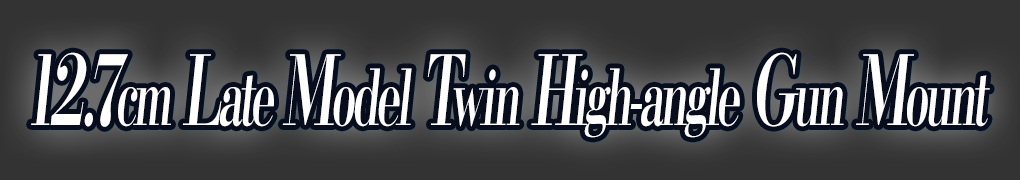
<style>
.page{position:relative;width:1020px;height:180px;background:#333333}
.page>*{position:absolute;margin:0}
.t1{font:76.8px "KochoStd-Heavy";letter-spacing:-0.08em;color:#ffffff;font-style:italic;scale:0.58 1}
.t2{font:96px "KochoStd-Heavy";letter-spacing:-0.08em;color:#ffffff;font-style:italic;scale:0.58 1}
</style>
<div class="page">
<p class="t1" style="left:31px;top:52px;width:959px;height:86px"><span class="t2">12.7</span>cm<span class="t2"> L</span>ate <span class="t2">M</span>odel<span class="t2"> T</span>win<span class="t2"> H</span>igh-angle<span class="t2"> G</span>un<span class="t2"> M</span>ount</p>
</div>
